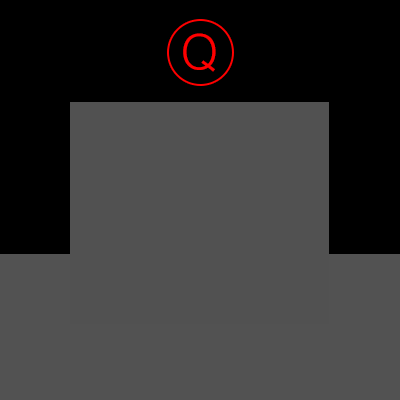
<style>
.page{position:relative;width:400px;height:400px;background:#000000}
.page>*{position:absolute;margin:0}
.t1{font:48px "Helvetica-Light";color:#ff0000}
</style>
<div class="page">
<p class="t1" style="left:183px;top:33px;width:33px;height:39px">Q</p>
</div>
